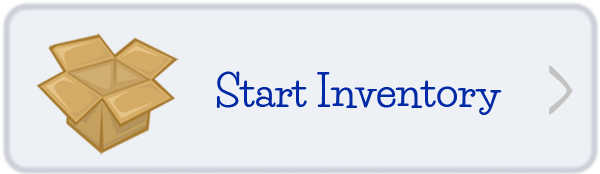
<style>
.page{position:relative;width:600px;height:174px;background:#edf0f5}
.page>*{position:absolute;margin:0}
.t1{font:41.8px "LifeSavers-Bold";color:#0229a6}
</style>
<div class="page">
<p class="t1" style="left:216px;top:71px;width:286px;height:44px">Start Inventory</p>
</div>
